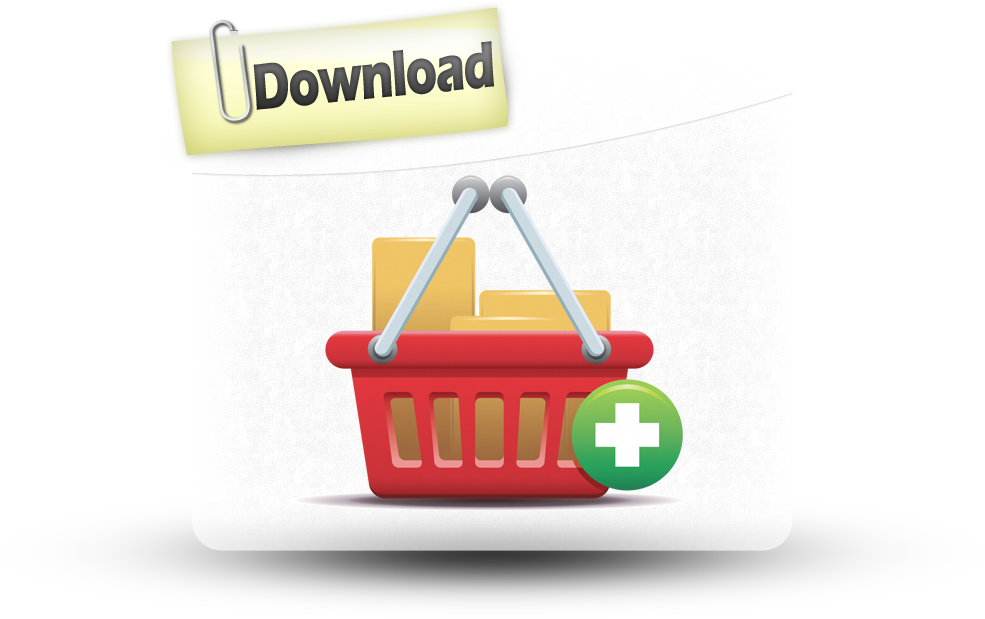
<style>
.page{position:relative;width:985px;height:619px;background:#ffffff}
.page>*{position:absolute;margin:0}
.t1{font:67.2px "ErasITC-Bold";letter-spacing:-0.05em;color:#4c4c4c;font-weight:bold;scale:0.71 1}
</style>
<div class="page">
<p class="t1" style="left:253px;top:41px;width:241px;height:69px;rotate:-6deg">Download</p>
</div>
